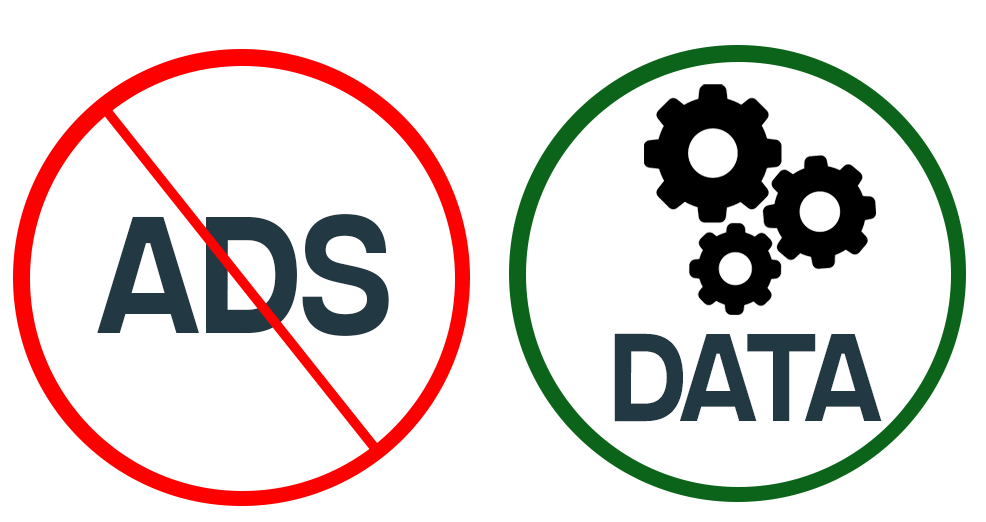
<style>
.page{position:relative;width:986px;height:522px;background:#ffffff}
.page>*{position:absolute;margin:0}
.t1{font:165.9px "IntegralCF-Regular";color:#223843;scale:0.79 1}
.t2{font:124.4px "IntegralCF-Regular";color:#223843;scale:0.79 1}
</style>
<div class="page">
<p class="t1" style="left:97px;top:214px;width:292px;height:122px">ADS</p>
<p class="t2" style="left:614px;top:333px;width:268px;height:89px">data</p>
</div>
